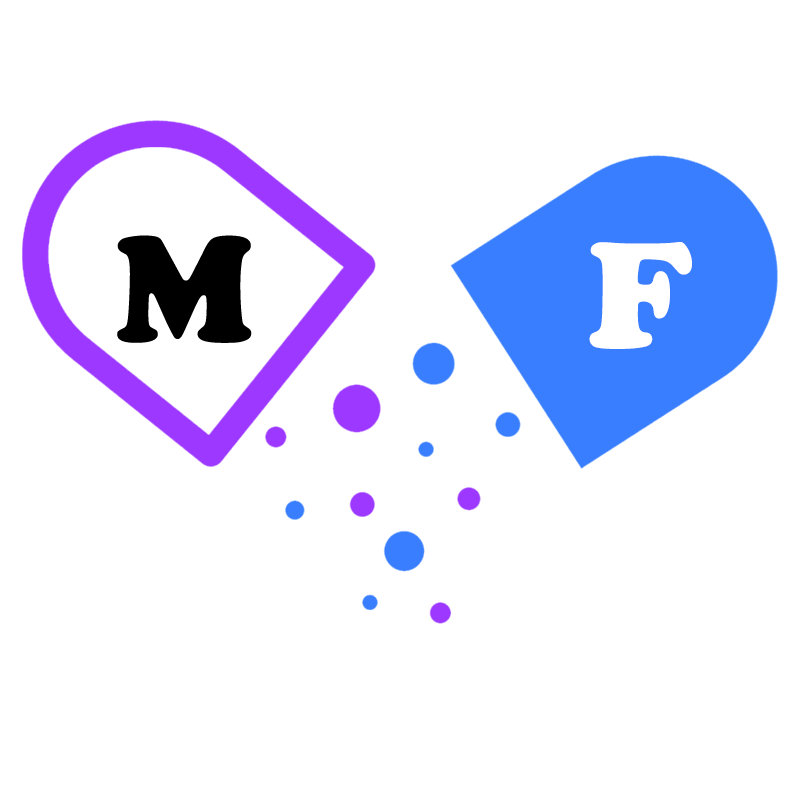
<style>
.page{position:relative;width:800px;height:800px;background:#ffffff}
.page>*{position:absolute;margin:0}
.t1{font:156px "CooperBlack";letter-spacing:0.08em;color:#09040b;text-transform:uppercase}
.t2{font:156px "CooperBlack";letter-spacing:0.08em;color:#ffffff;text-transform:uppercase}
</style>
<div class="page">
<p class="t1" style="left:117px;top:235px;width:135px;height:108px">M</p>
<p class="t2" style="left:589px;top:242px;width:103px;height:107px">F</p>
</div>
